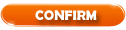
<style>
.page{position:relative;width:126px;height:30px;background:#ffffff}
.page>*{position:absolute;margin:0}
.t1{font:14px "BerlinSansFBDemi-Bold";color:#ffffff;text-transform:uppercase}
</style>
<div class="page">
<p class="t1" style="left:35px;top:10px;width:62px;height:11px">confirm</p>
</div>
